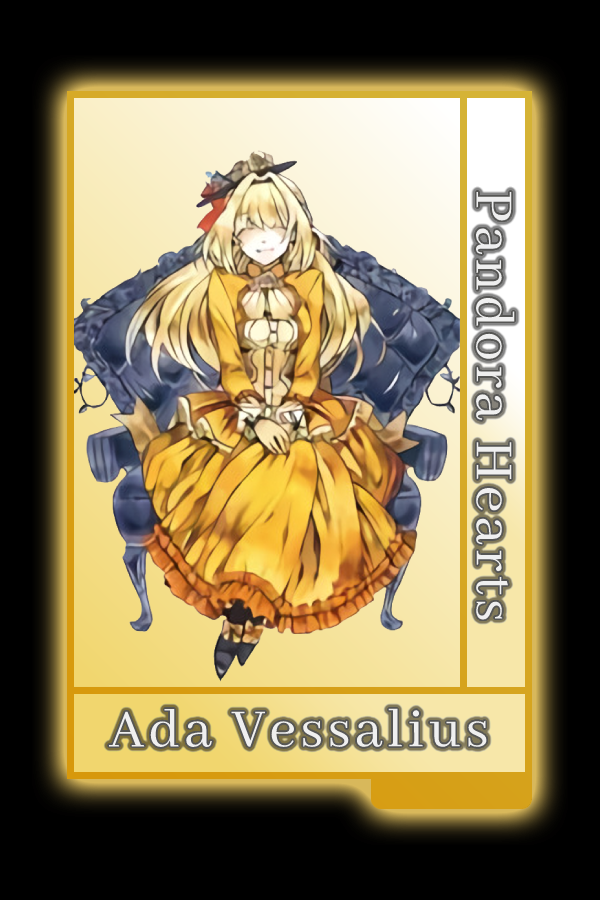
<style>
.page{position:relative;width:600px;height:900px;background:#000000}
.page>*{position:absolute;margin:0}
.t1{font:59.1px "AbhayaLibre-Regular";letter-spacing:0.072em;color:#efefef}
.t2{font:59px "AbhayaLibre-Regular";letter-spacing:0.072em;color:#efefef}
</style>
<div class="page">
<p class="t1" style="left:476px;top:192px;width:39px;height:428px;rotate:90deg">Pandora Hearts</p>
<p class="t2" style="left:108px;top:708px;width:379px;height:40px">Ada Vessalius</p>
</div>
